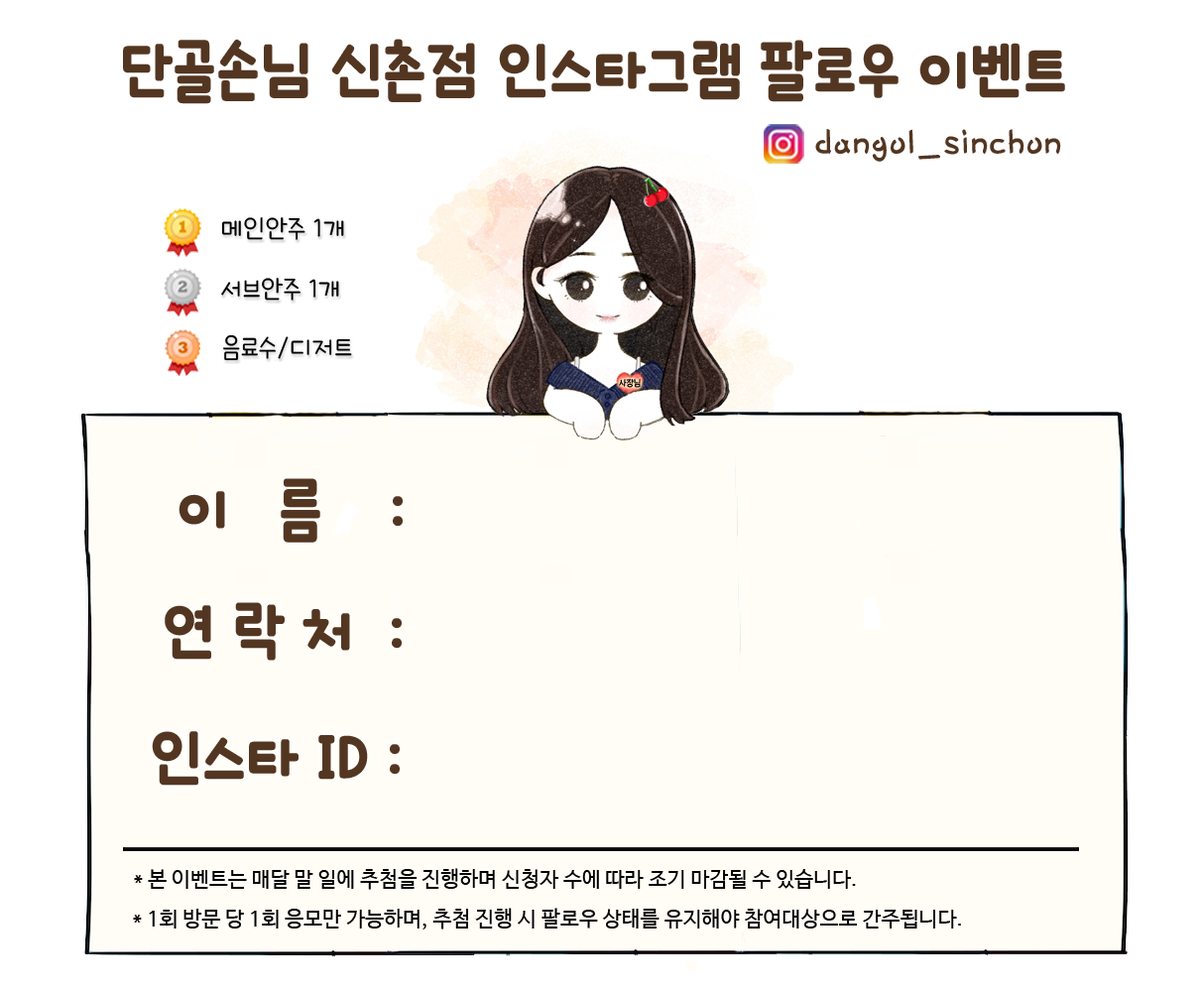
<style>
.page{position:relative;width:1202px;height:992px;background:#ffffff}
.page>*{position:absolute;margin:0}
.t1{font:66.1px "icTTHayanbunpilB";color:#533621}
.t2{font:44.6px "Pix_HUFriend132";color:#533621}
.t3{font:27.8px "icTTHayanbunpilL";color:#000000}
.t4{font:9.1px "THEMiss";color:#000000}
.t5{font:21.2px "NanumBarunGothic";color:#000000}
</style>
<div class="page">
<p class="t1" style="left:123px;top:39px;width:942px;height:65px">단골손님 신촌점 인스타그램 팔로우 이벤트</p>
<p class="t2" style="left:815px;top:129px;width:246px;height:33px">dangol_sinchon</p>
<p class="t3" style="left:221px;top:217px;width:123px;height:23px">메인안주 1개</p>
<p class="t3" style="left:221px;top:278px;width:118px;height:23px">서브안주 1개</p>
<p class="t3" style="left:223px;top:334px;width:129px;height:27px">음료수/디저트</p>
<p class="t4" style="left:619px;top:379px;width:22px;height:9px">사장님</p>
<p class="t1" style="left:179px;top:478px;width:224px;height:65px">이   름    :</p>
<p class="t1" style="left:165px;top:602px;width:237px;height:59px">연 락 처  :</p>
<p class="t1" style="left:152px;top:731px;width:248px;height:55px">인스타 ID :</p>
<p class="t5" style="left:134px;top:868px;width:722px;height:22px">* 본 이벤트는 매달 말 일에 추첨을 진행하며 신청자 수에 따라 조기 마감될 수 있습니다.</p>
<p class="t5" style="left:133px;top:908px;width:828px;height:21px">* 1회 방문 당 1회 응모만 가능하며, 추첨 진행 시 팔로우 상태를 유지해야 참여대상으로 간주됩니다.</p>
</div>
